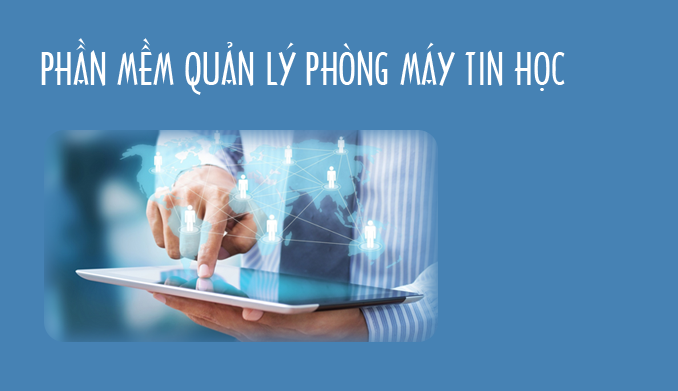
<style>
.page{position:relative;width:678px;height:391px;background:#4682b4}
.page>*{position:absolute;margin:0}
.t1{font:43.3px "Architecture";color:#ffffff}
</style>
<div class="page">
<p class="t1" style="left:41px;top:38px;width:524px;height:57px">PHẦN MỀM QUẢN LÝ PHÒNG MÁY TIN HỌC</p>
</div>
